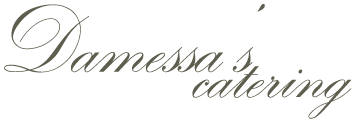
<style>
.page{position:relative;width:357px;height:120px;background:#ffffff}
.page>*{position:absolute;margin:0}
.t1{font:100px "KunstlerScript";color:#5f5e4e;scale:0.89 1}
.t2{font:90px "KunstlerScript";color:#5f5e4e;scale:0.89 1}
</style>
<div class="page">
<p class="t1" style="left:4px;top:4px;width:261px;height:69px">Damessa’s</p>
<p class="t2" style="left:192px;top:66px;width:160px;height:53px">catering</p>
</div>
